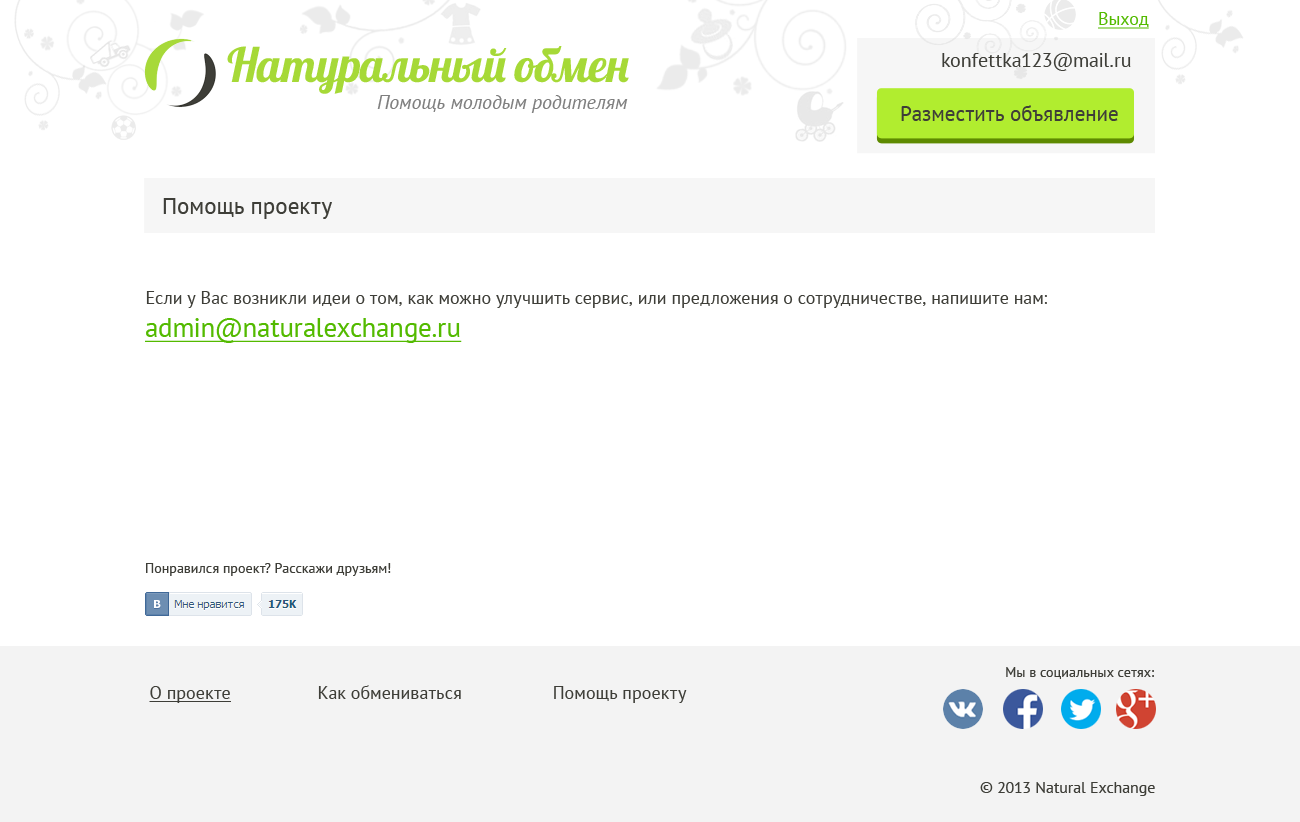
<style>
.page{position:relative;width:1300px;height:822px;background:#ffffff}
.page>*{position:absolute;margin:0}
.t1{font:18px "PTSans-Regular";color:#53ba00;text-decoration:underline}
.t2{font:47.4px "Lobster";letter-spacing:-0.08em;color:#a6d937}
.t3{font:20px "PTSans-Regular";color:#3e3e38}
.t4{font:20px "PTSans-Italic";color:#7f7f7f}
.t5{font:21px "PTSans-Regular";color:#3e3e38}
.t6{font:23px "PTSans-Regular";color:#3e3e38}
.t7{font:18px "PTSans-Regular";color:#3e3e38}
.t8{font:27px "PTSans-Regular";color:#53ba00;text-decoration:underline}
.t9{font:14px "PTSans-Regular";color:#3e3e38}
.t10{font:18px "PTSans-Regular";color:#3e3e38;text-decoration:underline}
.t11{font:16px "PTSans-Regular";color:#3e3e38}
</style>
<div class="page">
<p class="t1" style="left:1098px;top:12px;width:51px;height:17px">Выход</p>
<p class="t2" style="left:227px;top:46px;width:402px;height:48px">Натуральный  обмен</p>
<p class="t3" style="left:942px;top:53px;width:189px;height:18px">konfettka123@mail.ru</p>
<p class="t4" style="left:377px;top:95px;width:251px;height:18px">Помощь молодым родителям</p>
<p class="t5" style="left:901px;top:105px;width:217px;height:16px">Разместить объявление</p>
<p class="t6" style="left:163px;top:198px;width:169px;height:21px">Помощь проекту</p>
<p class="t7" style="left:146px;top:291px;width:901px;height:17px">Если у Вас возникли идеи о том, как можно улучшить сервис, или предложения о сотрудничестве, напишите нам:</p>
<p class="t8" style="left:145px;top:318px;width:317px;height:25px">admin@naturalexchange.ru</p>
<p class="t9" style="left:146px;top:563px;width:245px;height:13px">Понравился проект? Расскажи друзьям!</p>
<p class="t9" style="left:1006px;top:667px;width:148px;height:12px">Мы в социальных сетях:</p>
<p class="t7" style="left:149px;top:685px;width:538px;height:18px"><span class="t10">О проекте</span>       Как обмениваться            Помощь  проекту</p>
<p class="t11" style="left:980px;top:782px;width:175px;height:14px">© 2013 Natural Exchange</p>
</div>
